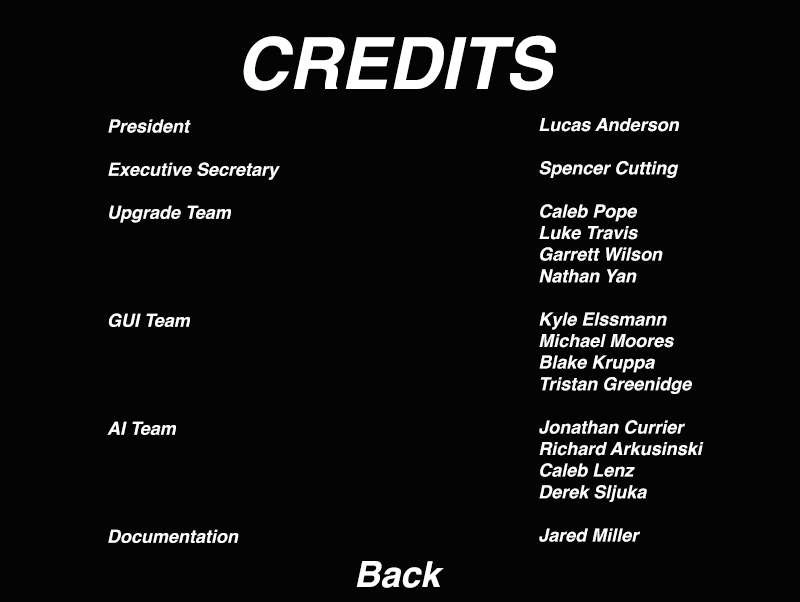
<style>
.page{position:relative;width:800px;height:602px;background:#050404}
.page>*{position:absolute;margin:0}
.t1{font:72px "Helvetica-BoldOblique";color:#feffff}
.t2{font:18px "Helvetica-BoldOblique";color:#feffff}
.t3{font:36px "Helvetica-BoldOblique";color:#feffff}
</style>
<div class="page">
<p class="t1" style="left:243px;top:35px;width:313px;height:56px">CREDITS</p>
<p class="t2" style="left:107px;top:119px;width:173px;height:424px">President<br><br>Executive Secretary<br><br>Upgrade Team<br><br><br><br><br>GUI Team<br><br><br><br><br>AI Team<br><br><br><br><br>Documentation</p>
<p class="t2" style="left:539px;top:118px;width:165px;height:424px">Lucas Anderson<br><br>Spencer Cutting<br><br>Caleb Pope<br>Luke Travis<br>Garrett Wilson<br>Nathan Yan<br><br>Kyle Elssmann<br>Michael Moores<br>Blake Kruppa<br>Tristan Greenidge<br><br>Jonathan Currier<br>Richard Arkusinski<br>Caleb Lenz<br>Derek Sljuka<br><br>Jared Miller</p>
<p class="t3" style="left:356px;top:561px;width:88px;height:27px">Back</p>
</div>
